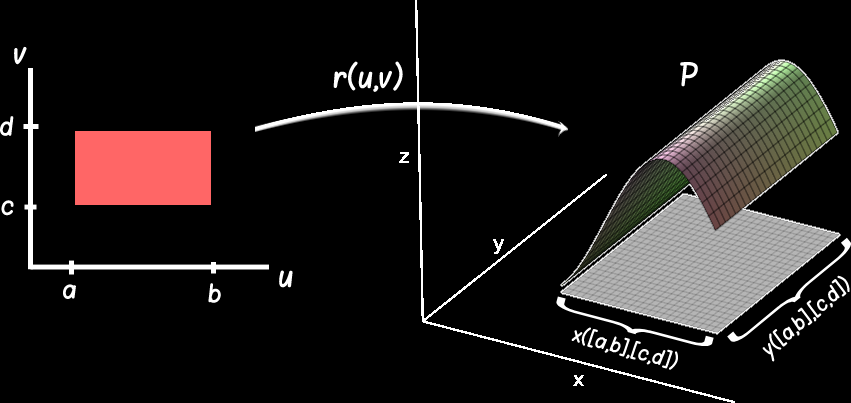
<style>
.page{position:relative;width:851px;height:403px;background:#000000}
.page>*{position:absolute;margin:0}
.t1{font:24px "Blokletters-Viltstift";color:#ffffff}
.t2{font:20px "Blokletters-Viltstift";color:#ffffff}
.t3{font:16px "Blokletters-Viltstift";color:#ffffff}
.t4{font:161.1px "BonvenoCF-Light";color:#ffffff;scale:0.31 1}
</style>
<div class="page">
<p class="t1" style="left:14px;top:46px;width:13px;height:19px">v</p>
<p class="t1" style="left:333px;top:61px;width:70px;height:31px">r(u,v)</p>
<p class="t1" style="left:680px;top:61px;width:18px;height:26px">P</p>
<p class="t2" style="left:0px;top:116px;width:14px;height:20px">d</p>
<p class="t2" style="left:1px;top:200px;width:13px;height:16px">c</p>
<p class="t1" style="left:279px;top:270px;width:14px;height:18px">u</p>
<p class="t3" style="left:762px;top:275px;width:88px;height:87px;rotate:-40deg">y([a,b],[c,d])</p>
<p class="t2" style="left:63px;top:284px;width:13px;height:15px">a</p>
<p class="t2" style="left:208px;top:283px;width:13px;height:20px">b</p>
<p class="t4" style="left:556px;top:296px;width:158px;height:50px;rotate:-75deg">{</p>
<p class="t3" style="left:571px;top:327px;width:107px;height:43px;rotate:16deg">x([a,b],[c,d])</p>
</div>
